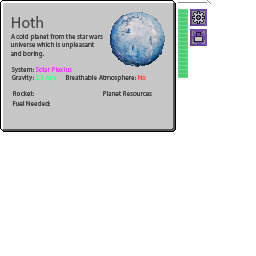
<style>
.page{position:relative;width:256px;height:256px;background:#ffffff}
.page>*{position:absolute;margin:0}
.t1{font:16px "MyriadPro-Regular";color:#494949}
.t2{font:7px "MyriadPro-Regular";color:#494949}
.t3{font:7px "MyriadPro-Regular";color:#eb44ff}
.t4{font:7px "MyriadPro-Regular";color:#40ff88}
.t5{font:7px "MyriadPro-Regular";color:#fc5151}
</style>
<div class="page">
<p class="t1" style="left:12px;top:16px;width:31px;height:12px">Hoth</p>
<p class="t2" style="left:10px;top:34px;width:93px;height:24px">A cold planet from the star wars<br>universe which is unpleasant<br>and boring.</p>
<p class="t3" style="left:11px;top:67px;width:61px;height:7px"><span class="t2">System: </span>Solar Plexius</p>
<p class="t2" style="left:11px;top:75px;width:46px;height:7px">Gravity: <span class="t4">2.3 m/s</span></p>
<p class="t2" style="left:65px;top:75px;width:81px;height:7px">Breathable Atmosphere: <span class="t5">No</span></p>
<p class="t2" style="left:12px;top:101px;width:39px;height:5px">Fuel Needed:</p>
<p class="t2" style="left:13px;top:91px;width:21px;height:5px">Rocket:</p>
<p class="t2" style="left:103px;top:91px;width:49px;height:5px">Planet Resources</p>
</div>
